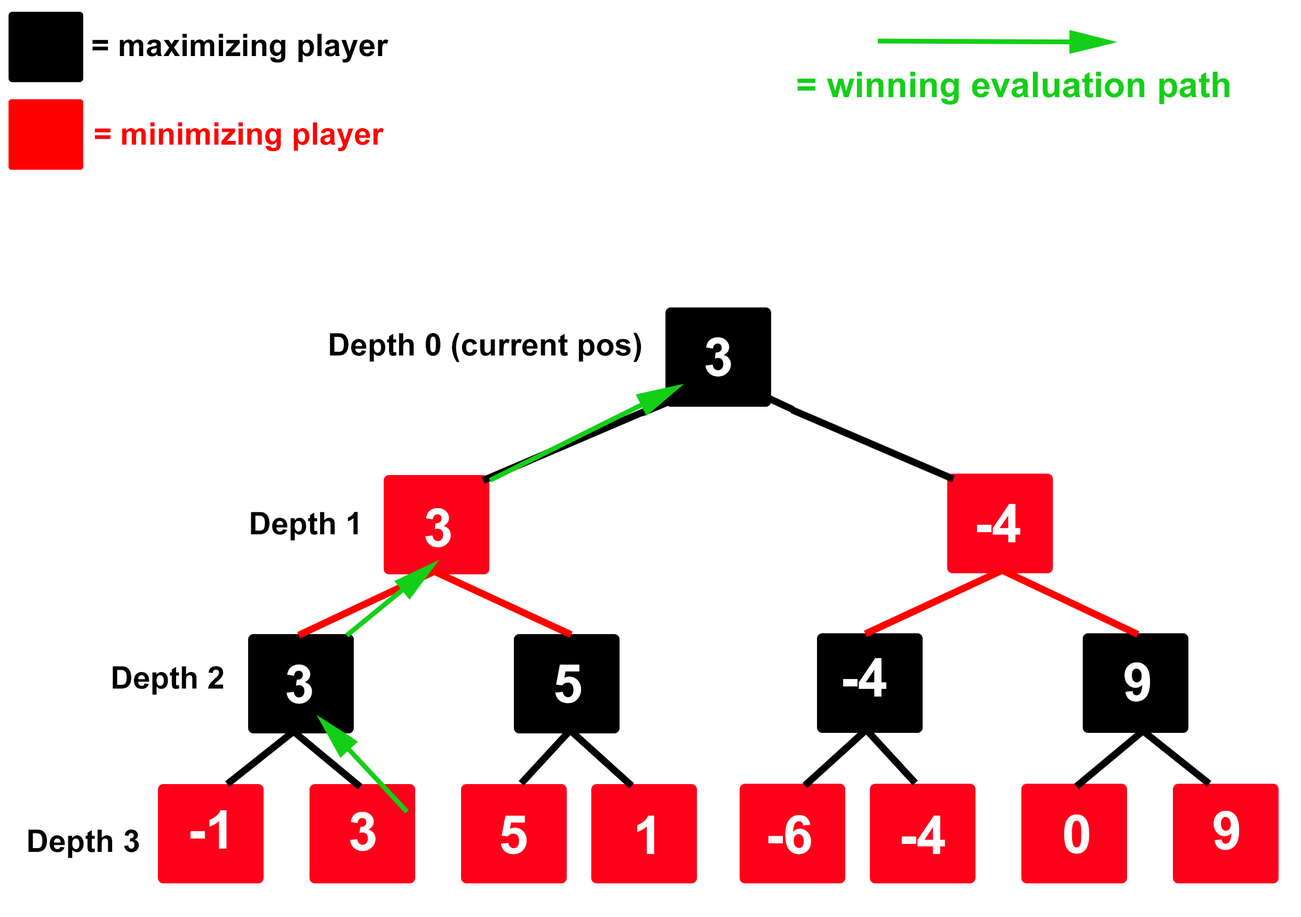
<style>
.page{position:relative;width:1301px;height:917px;background:#ffffff}
.page>*{position:absolute;margin:0}
.t1{font:31.1px "Arial-BoldMT";color:#000000}
.t2{font:35.6px "Arial-BoldMT";color:#13cf17}
.t3{font:31.1px "Arial-BoldMT";color:#ff0000}
.t4{font:53.4px "Arial-BoldMT";color:#ffffff}
</style>
<div class="page">
<p class="t1" style="left:92px;top:34px;width:296px;height:29px">= maximizing player</p>
<p class="t2" style="left:797px;top:71px;width:432px;height:34px">= winning evaluation path</p>
<p class="t3" style="left:94px;top:122px;width:290px;height:30px">= minimizing player</p>
<p class="t1" style="left:330px;top:332px;width:311px;height:30px">Depth 0 (current pos)</p>
<p class="t4" style="left:705px;top:337px;width:26px;height:40px">3</p>
<p class="t4" style="left:425px;top:508px;width:26px;height:39px">3</p>
<p class="t4" style="left:977px;top:504px;width:43px;height:38px">-4</p>
<p class="t1" style="left:251px;top:512px;width:107px;height:29px">Depth 1</p>
<p class="t1" style="left:113px;top:666px;width:111px;height:29px">Depth 2</p>
<p class="t4" style="left:287px;top:664px;width:25px;height:40px">3</p>
<p class="t4" style="left:555px;top:664px;width:26px;height:39px">5</p>
<p class="t4" style="left:843px;top:658px;width:43px;height:38px">-4</p>
<p class="t4" style="left:1124px;top:662px;width:26px;height:40px">9</p>
<p class="t4" style="left:190px;top:810px;width:37px;height:38px">-1</p>
<p class="t4" style="left:350px;top:812px;width:26px;height:39px">3</p>
<p class="t4" style="left:500px;top:815px;width:27px;height:39px">5</p>
<p class="t4" style="left:637px;top:815px;width:17px;height:39px">1</p>
<p class="t4" style="left:768px;top:815px;width:43px;height:39px">-6</p>
<p class="t4" style="left:902px;top:815px;width:43px;height:39px">-4</p>
<p class="t4" style="left:1064px;top:814px;width:25px;height:40px">0</p>
<p class="t4" style="left:1213px;top:810px;width:26px;height:40px">9</p>
<p class="t1" style="left:28px;top:829px;width:111px;height:29px">Depth 3</p>
</div>
